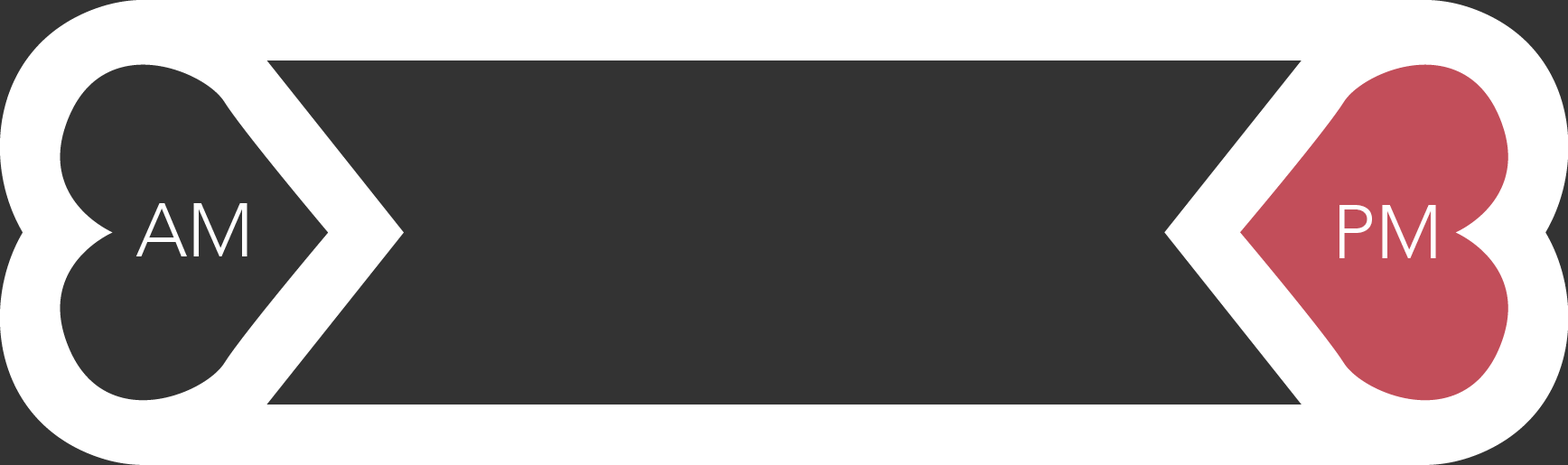
<style>
.page{position:relative;width:1568px;height:465px;background:#333333}
.page>*{position:absolute;margin:0}
.t1{font:75.3px "AvenirLTStd-Light";color:#ffffff}
</style>
<div class="page">
<p class="t1" style="left:135px;top:203px;width:112px;height:54px">AM</p>
<p class="t1" style="left:1339px;top:205px;width:97px;height:53px">PM</p>
</div>
